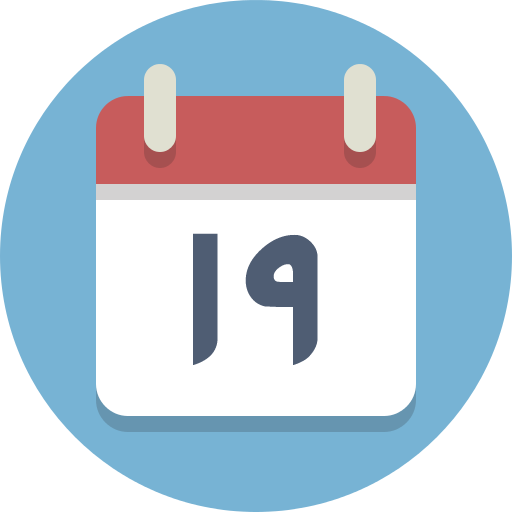
<style>
.page{position:relative;width:512px;height:512px;background:#ffffff}
.page>*{position:absolute;margin:0}
.t1{font:235px "BEsfehanBold";color:#4f5d73}
</style>
<div class="page">
<p class="t1" style="left:193px;top:233px;width:125px;height:132px">19</p>
</div>
